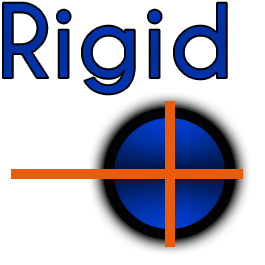
<style>
.page{position:relative;width:265px;height:265px;background:#ffffff}
.page>*{position:absolute;margin:0}
.t1{font:96.3px "CaviarDreams-Bold";color:#0030a2}
</style>
<div class="page">
<p class="t1" style="left:3px;top:2px;width:224px;height:93px">Rigid</p>
</div>
